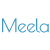
<style>
.page{position:relative;width:50px;height:50px;background:#ffffff}
.page>*{position:absolute;margin:0}
.t1{font:18px "PoiretOne-Regular";color:#3d9ac3}
</style>
<div class="page">
<p class="t1" style="left:2px;top:18px;width:47px;height:15px">Meela</p>
</div>
